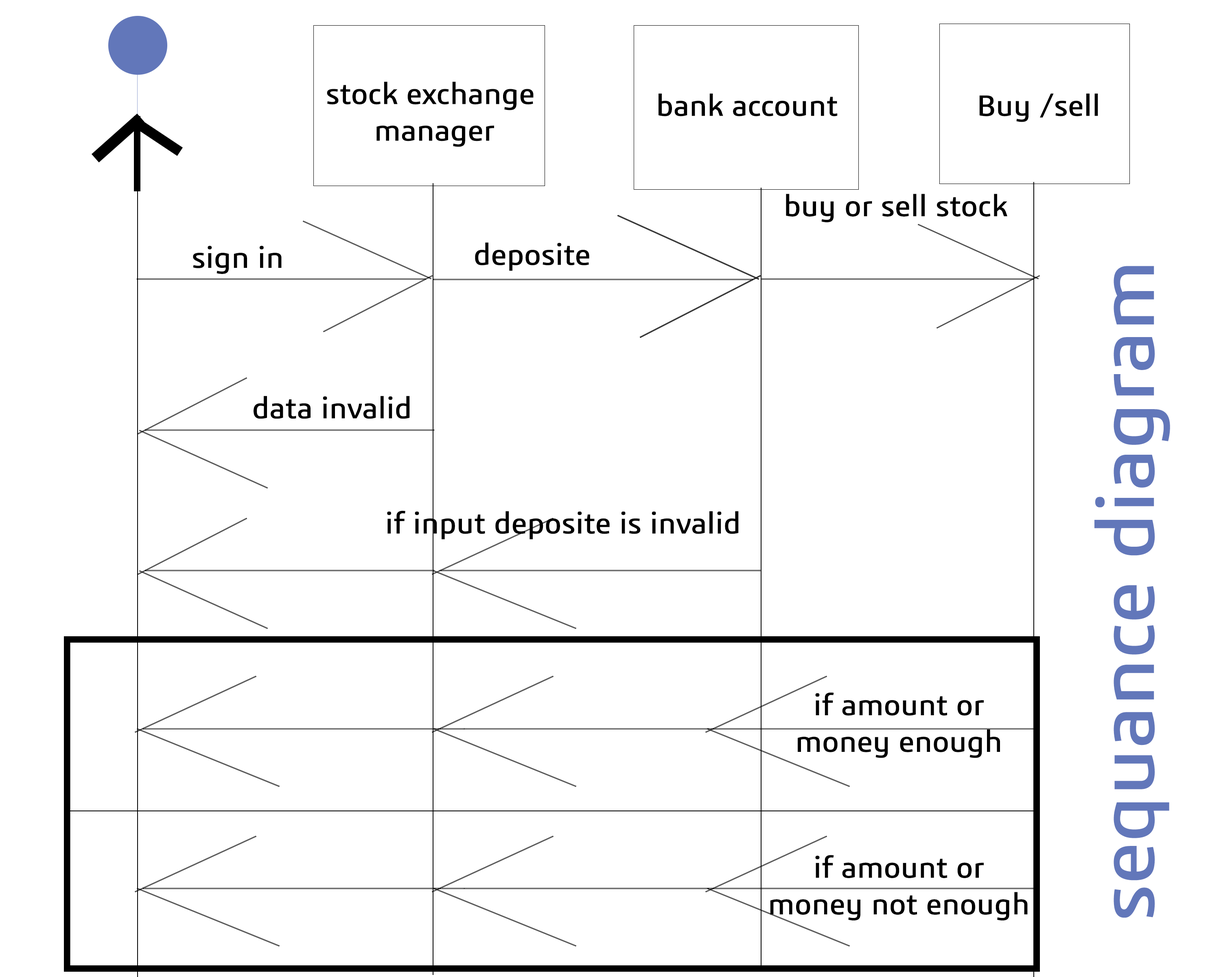
<style>
.page{position:relative;width:1221px;height:977px;background:#ffffff}
.page>*{position:absolute;margin:0}
.t1{font:30.5px "3ds";color:#000000}
.t2{font:81.4px "3ds";color:#6277ba}
</style>
<div class="page">
<p class="t1" style="left:327px;top:81px;width:207px;height:66px;text-align:center">stock exchange<br> manager</p>
<p class="t1" style="left:658px;top:93px;width:180px;height:23px">bank account</p>
<p class="t1" style="left:979px;top:93px;width:119px;height:29px">Buy /sell</p>
<p class="t1" style="left:786px;top:194px;width:221px;height:28px">buy or sell stock</p>
<p class="t1" style="left:193px;top:245px;width:89px;height:29px">sign in</p>
<p class="t1" style="left:475px;top:242px;width:114px;height:29px">deposite</p>
<p class="t2" style="left:1094px;top:266px;width:76px;height:652px;rotate:-90deg">sequance diagram</p>
<p class="t1" style="left:254px;top:396px;width:156px;height:23px">data invalid</p>
<p class="t1" style="left:387px;top:510px;width:352px;height:29px">if input deposite is invalid</p>
<p class="t1" style="left:798px;top:692px;width:202px;height:66px;text-align:center">if amount or<br>money enough</p>
<p class="t1" style="left:770px;top:855px;width:258px;height:65px;text-align:center">if amount or<br>money not enough</p>
</div>
